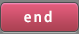
<style>
.page{position:relative;width:79px;height:34px}
.page>*{position:absolute;margin:0}
.t1{font:14px "KozGoPr6N-Bold";letter-spacing:0.14em;color:#ffffff}
</style>
<div class="page">
<p class="t1" style="left:24px;top:10px;width:28px;height:13px">end</p>
</div>
